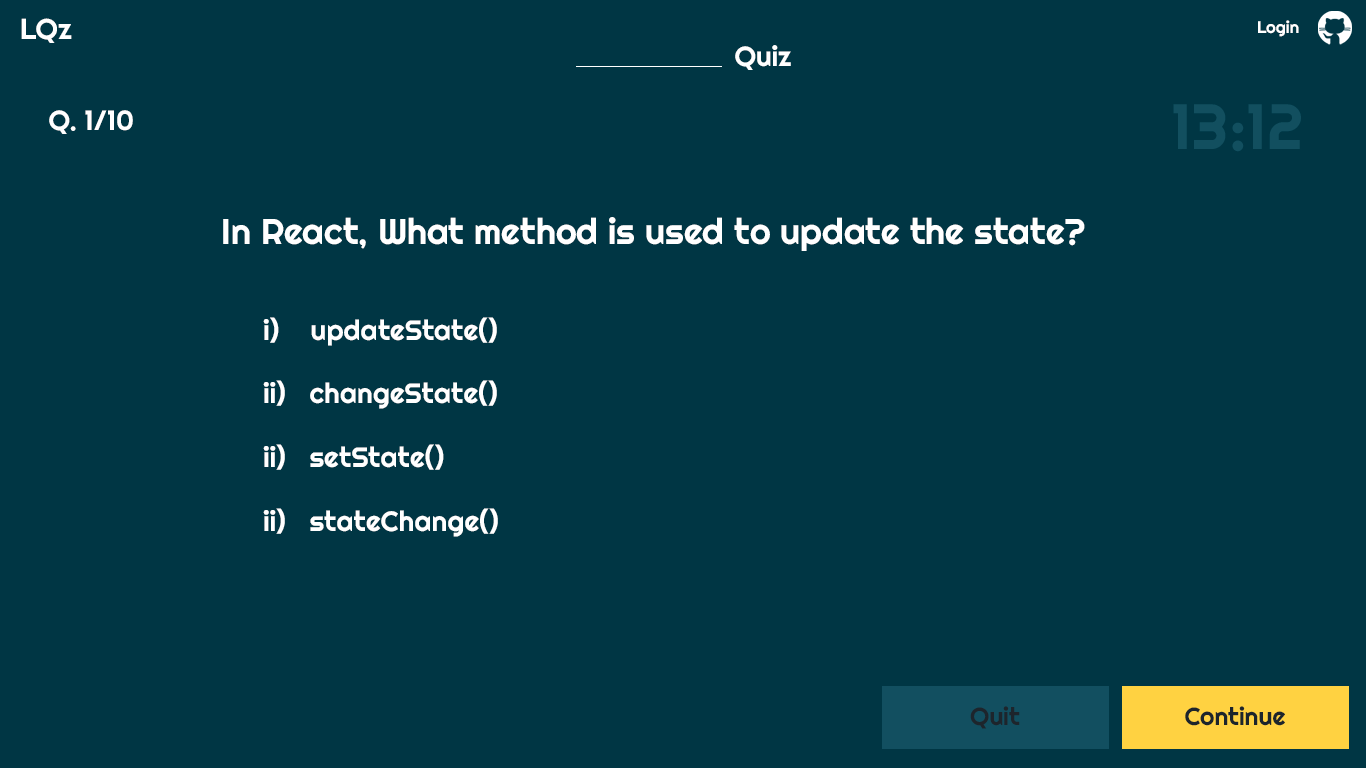
<style>
.page{position:relative;width:1366px;height:768px;background:#003644}
.page>*{position:absolute;margin:0}
.t1{font:28.7px "Righteous-Regular";color:#ffffff}
.t2{font:16.7px "Righteous-Regular";color:#ffffff}
.t3{font:27.7px "Righteous-Regular";color:#ffffff}
.t4{font:63.7px "Righteous-Regular";color:#124f5f}
.t5{font:35.7px "Righteous-Regular";color:#ffffff}
.t6{font:28.1px "Righteous-Regular";color:#ffffff}
.t7{font:24.7px "Righteous-Regular";color:#1d252c}
</style>
<div class="page">
<p class="t1" style="left:21px;top:18px;width:51px;height:25px">LQz</p>
<p class="t2" style="left:1258px;top:20px;width:41px;height:17px">Login</p>
<p class="t3" style="left:735px;top:45px;width:56px;height:25px">Quiz</p>
<p class="t3" style="left:49px;top:110px;width:84px;height:24px">Q. 1/10</p>
<p class="t4" style="left:1173px;top:104px;width:128px;height:48px">13:12</p>
<p class="t5" style="left:223px;top:217px;width:862px;height:34px">In React, What method is used to update the state?</p>
<p class="t6" style="left:263px;top:317px;width:234px;height:29px">i)    updateState()</p>
<p class="t6" style="left:263px;top:380px;width:234px;height:29px">ii)   changeState()</p>
<p class="t6" style="left:263px;top:444px;width:181px;height:26px">ii)   setState()</p>
<p class="t6" style="left:263px;top:508px;width:235px;height:29px">ii)   stateChange()</p>
<p class="t7" style="left:970px;top:706px;width:50px;height:23px">Quit</p>
<p class="t7" style="left:1185px;top:706px;width:100px;height:20px">Continue</p>
</div>
